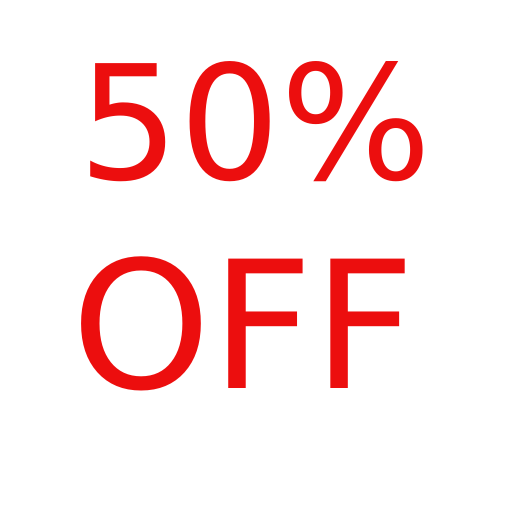
<style>
.page{position:relative;width:512px;height:513px;background:#ffffff}
.page>*{position:absolute;margin:0}
.t1{font:159px "DejaVuSans";color:#ec0e0e}
.t2{font:177.5px "DejaVuSans";color:#ec0e0e}
</style>
<div class="page">
<p class="t1" style="left:90px;top:61px;width:333px;height:121px">50%</p>
<p class="t2" style="left:81px;top:256px;width:324px;height:135px">OFF</p>
</div>
